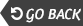
<style>
.page{position:relative;width:83px;height:26px;background:#404040}
.page>*{position:absolute;margin:0}
.t1{font:15px "Amaranth-Italic";color:#ffffff}
</style>
<div class="page">
<p class="t1" style="left:26px;top:8px;width:55px;height:15px">GO BACK</p>
</div>
